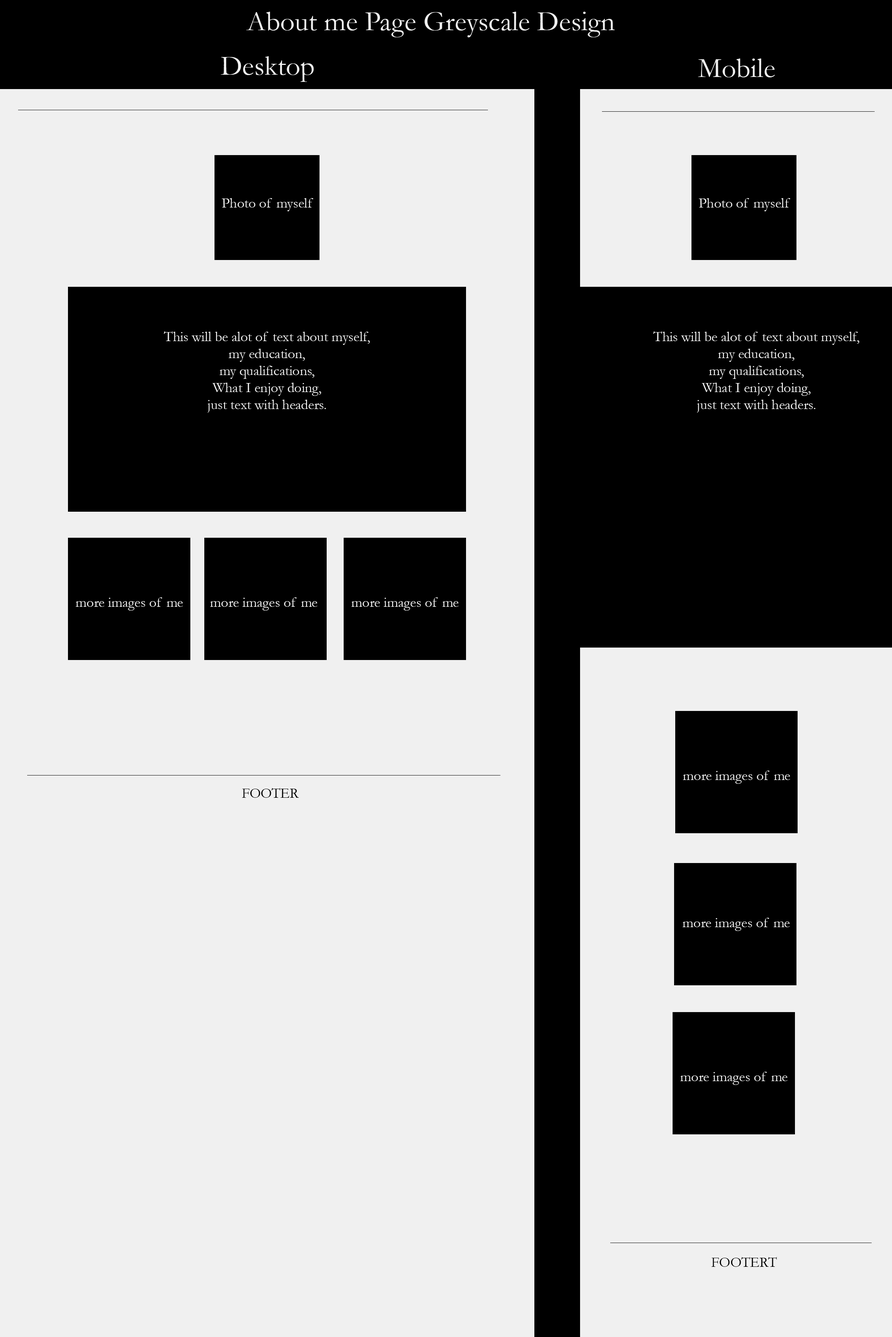
<style>
.page{position:relative;width:892px;height:1337px;background:#f0f0f0}
.page>*{position:absolute;margin:0}
.t1{font:28.3px "Garamond";color:#f0f0f0}
.t2{font:14.2px "Garamond";color:#f0f0f0}
.t3{font:14.2px "Garamond";color:#000000}
</style>
<div class="page">
<p class="t1" style="left:246px;top:12px;width:369px;height:25px">About me Page Greyscale Design</p>
<p class="t1" style="left:220px;top:56px;width:94px;height:26px">Desktop</p>
<p class="t1" style="left:698px;top:59px;width:77px;height:18px">Mobile</p>
<p class="t2" style="left:222px;top:198px;width:91px;height:13px">Photo of myself</p>
<p class="t2" style="left:698px;top:198px;width:92px;height:13px">Photo of myself</p>
<p class="t2" style="left:164px;top:331px;width:206px;height:82px;text-align:center">This will be alot of text about myself, <br>my education,<br>my qualifications,<br>What I enjoy doing,<br>just text with headers.</p>
<p class="t2" style="left:653px;top:331px;width:206px;height:82px;text-align:center">This will be alot of text about myself, <br>my education,<br>my qualifications,<br>What I enjoy doing,<br>just text with headers.</p>
<p class="t2" style="left:75px;top:598px;width:108px;height:13px">more images of me</p>
<p class="t2" style="left:210px;top:598px;width:107px;height:13px">more images of me</p>
<p class="t2" style="left:351px;top:598px;width:107px;height:13px">more images of me</p>
<p class="t2" style="left:682px;top:771px;width:108px;height:13px">more images of me</p>
<p class="t3" style="left:242px;top:788px;width:57px;height:10px">FOOTER</p>
<p class="t2" style="left:682px;top:918px;width:107px;height:13px">more images of me</p>
<p class="t2" style="left:680px;top:1072px;width:107px;height:13px">more images of me</p>
<p class="t3" style="left:711px;top:1257px;width:65px;height:10px">FOOTERT</p>
</div>
